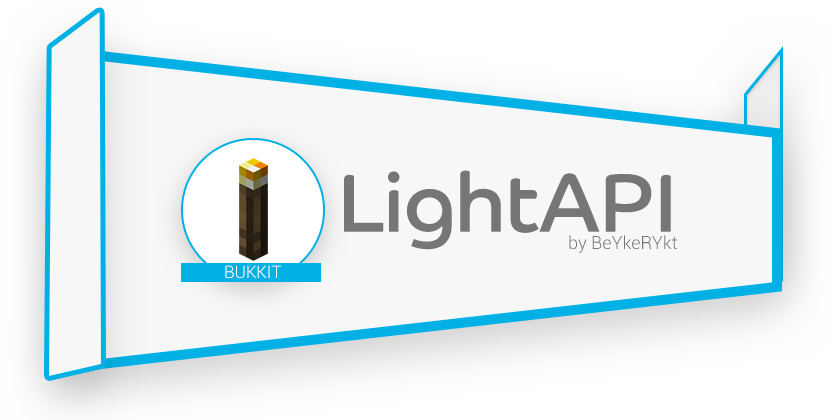
<style>
.page{position:relative;width:840px;height:420px;background:#f7f7f7}
.page>*{position:absolute;margin:0}
.t1{font:83px "CoHeadlineCorp-Regular";color:#767676}
.t2{font:18px "Roboto-Light";color:#767676}
.t3{font:17px "Roboto-Light";color:#f8f8f8}
</style>
<div class="page">
<p class="t1" style="left:344px;top:170px;width:327px;height:80px">LightAPI</p>
<p class="t2" style="left:569px;top:235px;width:108px;height:18px">by BeYkeRYkt</p>
<p class="t3" style="left:225px;top:265px;width:56px;height:13px">BUKKIT</p>
</div>
